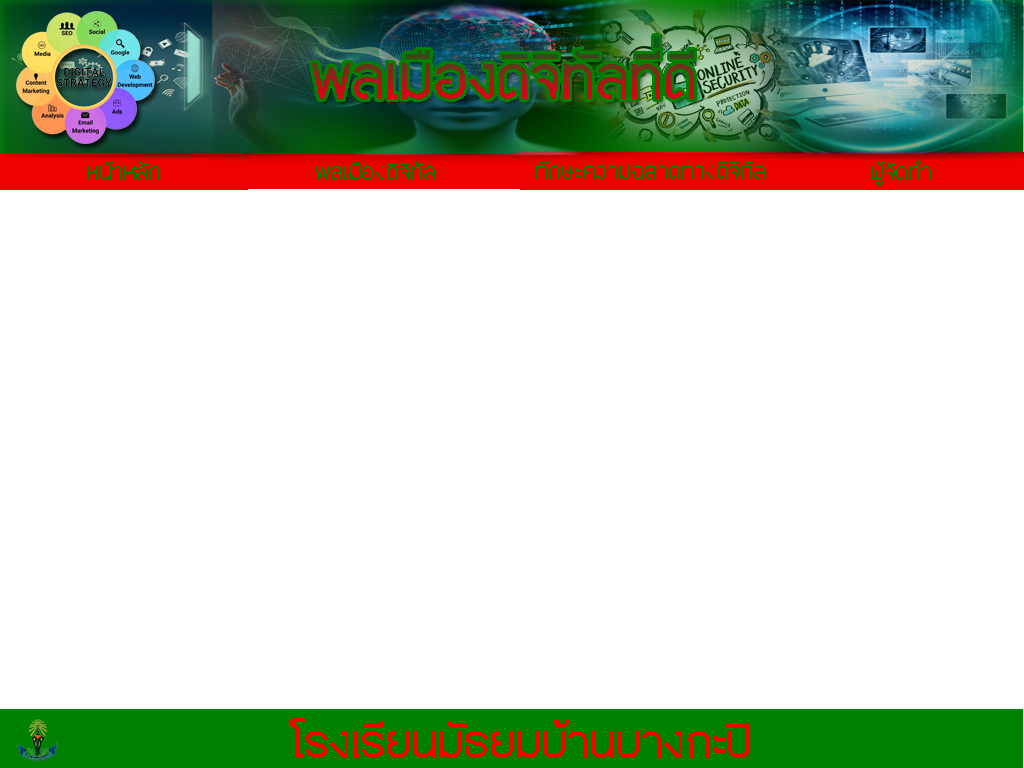
<style>
.page{position:relative;width:1024px;height:768px;background:#ffffff}
.page>*{position:absolute;margin:0}
.t1{font:71.1px "PK-Maehongson-Medium"}
.t2{font:27.1px "PK-Maehongson-Medium";color:#008000}
.t3{font:54.2px "PK-Maehongson-Medium";color:#ff0000}
</style>
<div class="page">
<p class="t1" style="left:312px;top:36px;width:382px;height:63px">พลเมืองดิจิทัลที่ดี</p>
<p class="t2" style="left:87px;top:161px;width:73px;height:19px">หน้าหลัก</p>
<p class="t2" style="left:536px;top:161px;width:229px;height:18px">ทักษะความฉลาดทางดิจิทัล</p>
<p class="t2" style="left:871px;top:160px;width:60px;height:26px">ผู้จัดทำ</p>
<p class="t2" style="left:315px;top:162px;width:120px;height:18px">พลเมืองดิจิทัล</p>
<p class="t3" style="left:290px;top:718px;width:460px;height:40px">โรงเรียนมัธยมบ้านบางกะปิ</p>
</div>
